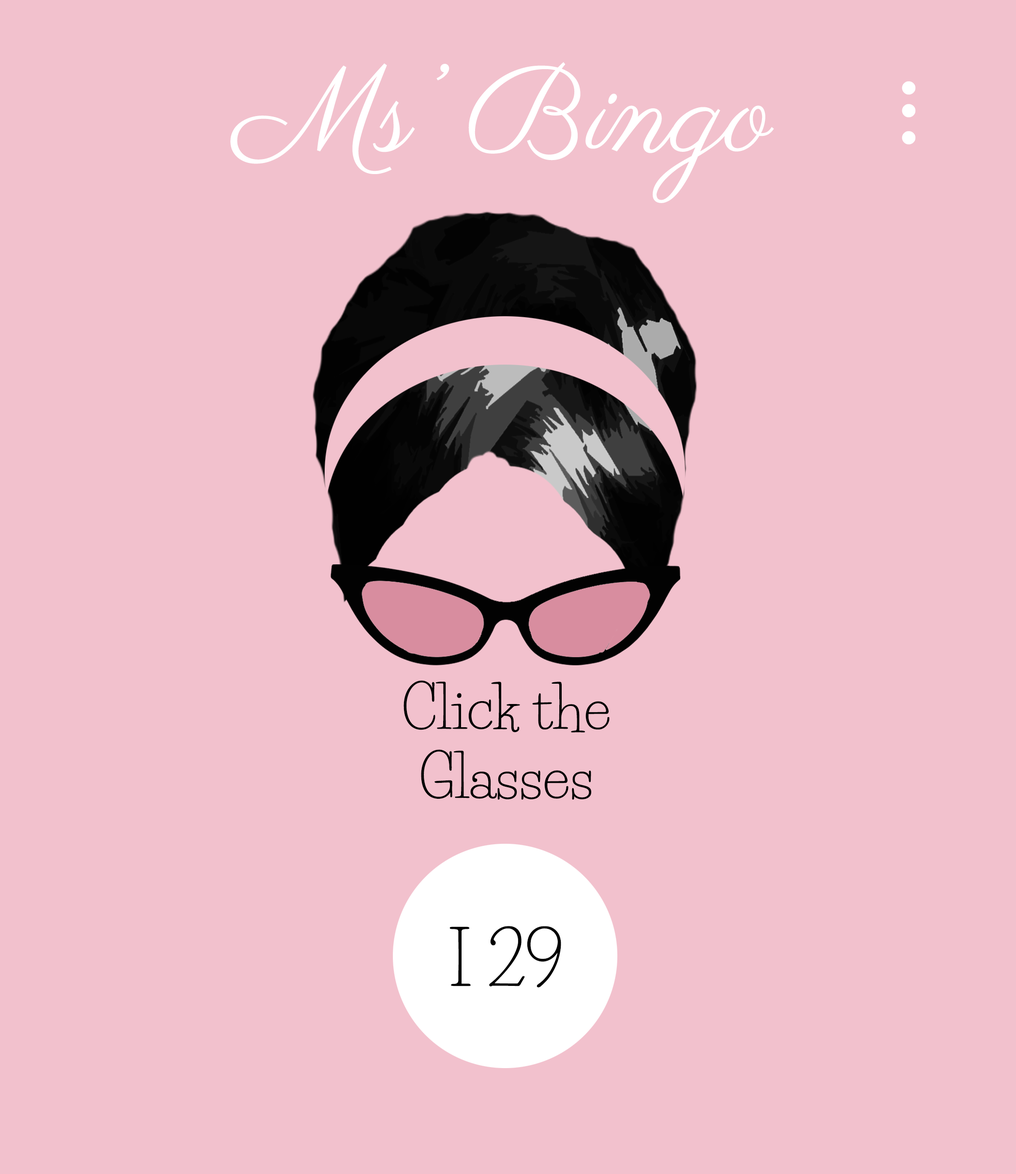
<style>
.page{position:relative;width:1016px;height:1174px;background:#f2c1cd}
.page>*{position:absolute;margin:0}
.t1{font:120.9px "Parisienne-Regular";color:#ffffff}
.t2{font:185.5px "Parisienne-Regular";color:#ffffff}
.t3{font:57.6px "LifeSavers-Regular";color:#020202}
.t4{font:71.9px "LifeSavers-Regular";color:#020202}
</style>
<div class="page">
<p class="t1" style="left:230px;top:62px;width:544px;height:141px">Ms’ Bingo</p>
<p class="t2" style="left:901px;top:81px;width:14px;height:14px">.</p>
<p class="t2" style="left:901px;top:104px;width:14px;height:14px">.</p>
<p class="t2" style="left:901px;top:131px;width:14px;height:14px">.</p>
<p class="t3" style="left:403px;top:680px;width:206px;height:120px;text-align:center">Click the<br>Glasses</p>
<p class="t4" style="left:449px;top:926px;width:112px;height:62px">I 29</p>
</div>
